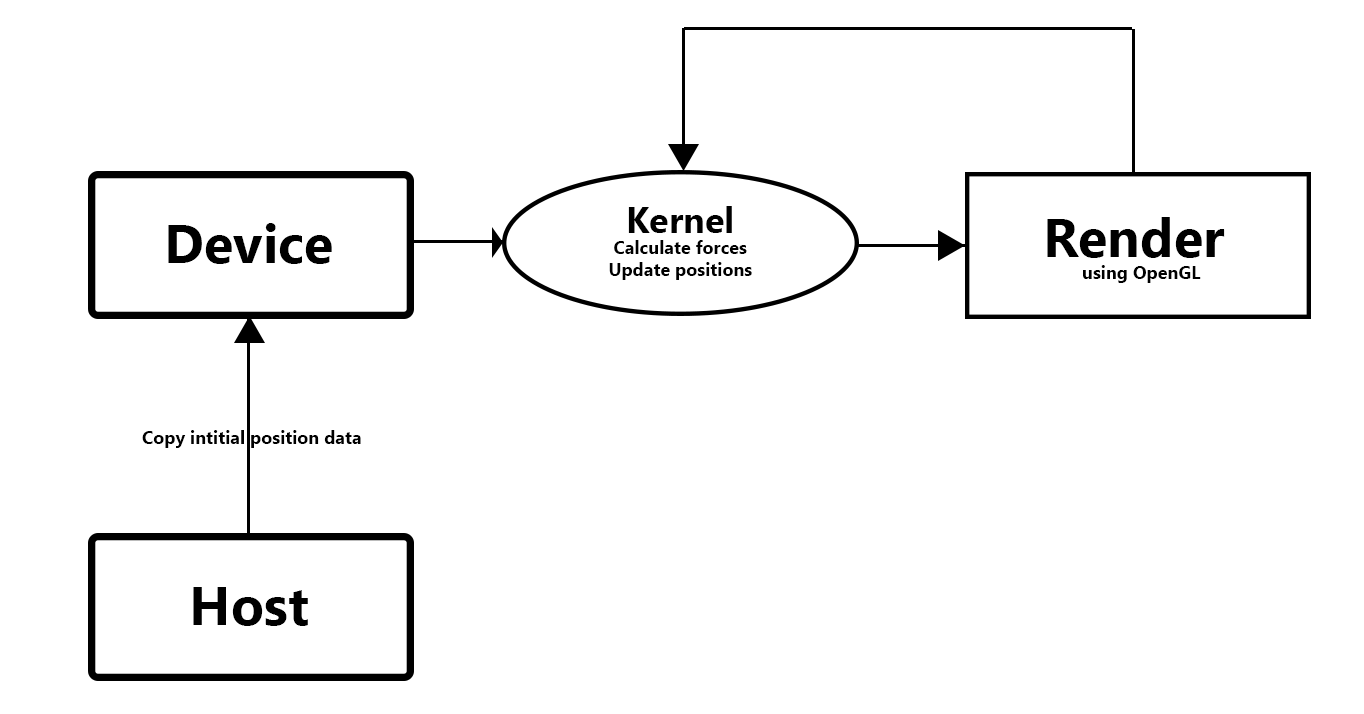
<style>
.page{position:relative;width:1364px;height:714px;background:#ffffff}
.page>*{position:absolute;margin:0}
.t1{font:18px "MyanmarText-Bold";color:#000000}
.t2{font:36px "MyanmarText-Bold";color:#000000}
.t3{font:54.2px "MyanmarText-Bold";color:#000000}
</style>
<div class="page">
<p class="t1" style="left:609px;top:206px;width:143px;height:74px;text-align:center"><span class="t2">Kernel<br></span>Calculate forces<br>Update positions</p>
<p class="t1" style="left:1047px;top:217px;width:178px;height:66px;text-align:center"><span class="t3">Render <br></span>using OpenGL</p>
<p class="t3" style="left:168px;top:223px;width:164px;height:41px">Device</p>
<p class="t1" style="left:142px;top:430px;width:219px;height:18px">Copy intitial position data</p>
<p class="t3" style="left:193px;top:587px;width:115px;height:39px">Host</p>
</div>
